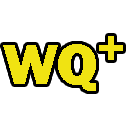
<style>
.page{position:relative;width:128px;height:128px;background:#ffffff}
.page>*{position:absolute;margin:0}
.t1{font:58.6px "FranklinGothic-Heavy";letter-spacing:-0.03em;color:#f0e312;scale:1.04 1}
.t2{font:49.3px "FranklinGothic-Heavy";letter-spacing:-0.03em;color:#f0e312;scale:1.04 1}
</style>
<div class="page">
<p class="t1" style="left:3px;top:36px;width:120px;height:55px">WQ<span class="t2">+</span></p>
</div>
